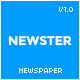
<style>
.page{position:relative;width:80px;height:80px;background:#009bff}
.page>*{position:absolute;margin:0}
.t1{font:8px "04b03";color:#ffffff}
.t2{font:12.5px "Montserrat-Bold";color:#ffffff}
.t3{font:8px "04b03";color:#ffffff;text-transform:uppercase}
</style>
<div class="page">
<p class="t1" style="left:59px;top:7px;width:14px;height:5px">V1.0</p>
<p class="t2" style="left:8px;top:35px;width:64px;height:11px">NEWSTER</p>
<p class="t3" style="left:19px;top:68px;width:43px;height:5px">NEWSPAPER</p>
</div>
